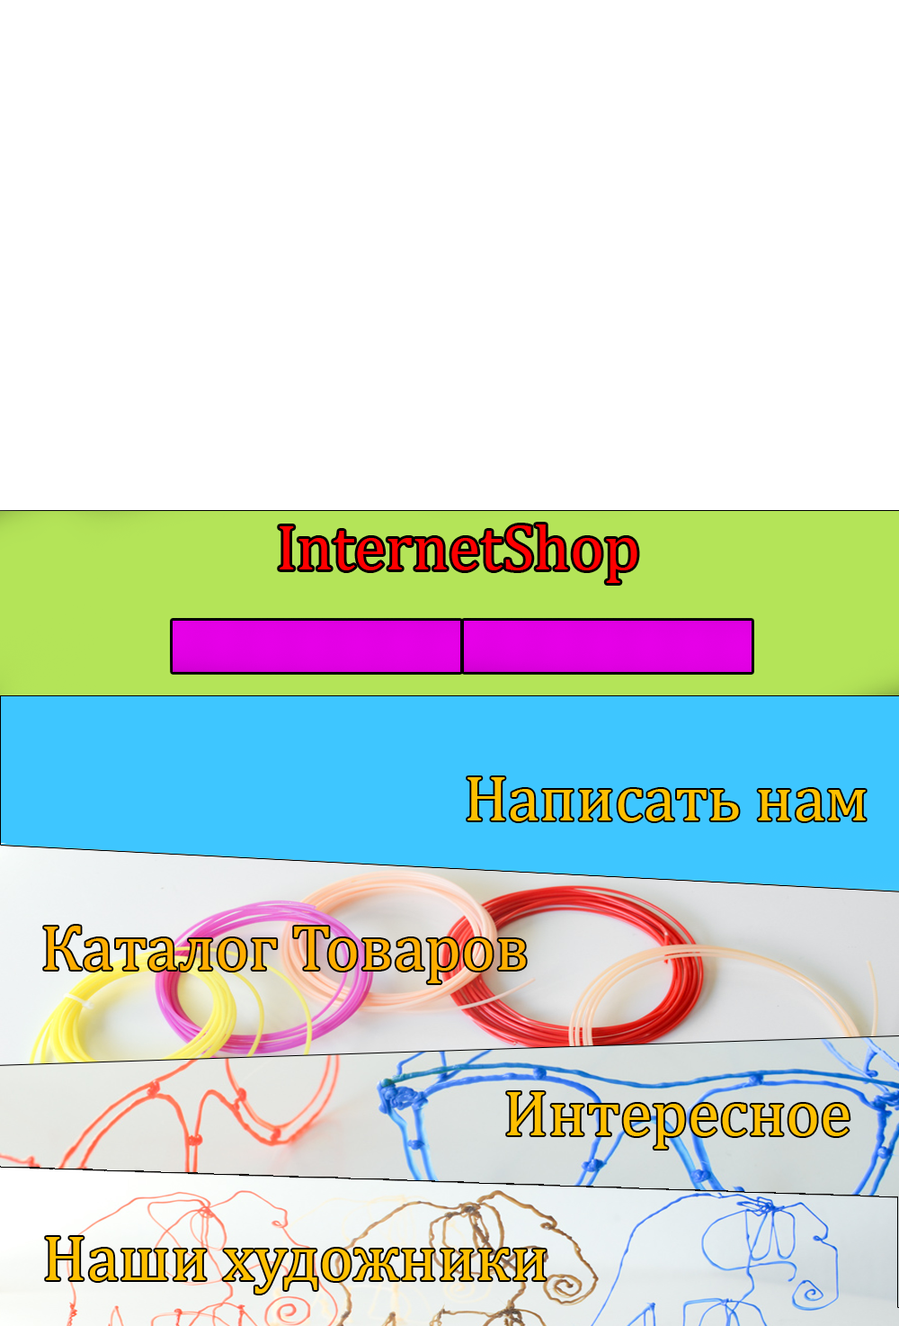
<style>
.page{position:relative;width:899px;height:1326px;background:#ffffff}
.page>*{position:absolute;margin:0}
.t1{font:64.8px "CambriaMath";color:#ff0000}
.t2{font:64.8px "CambriaMath";color:#ffc000}
.t3{font:64.8px "CambriaMath";color:#ffae00}
</style>
<div class="page">
<p class="t1" style="left:280px;top:524px;width:358px;height:59px">InternetShop</p>
<p class="t2" style="left:468px;top:777px;width:398px;height:44px">Написать нам</p>
<p class="t3" style="left:44px;top:926px;width:482px;height:57px">Каталог Товаров</p>
<p class="t2" style="left:507px;top:1092px;width:343px;height:57px">Интересное</p>
<p class="t2" style="left:46px;top:1237px;width:500px;height:56px">Наши художники</p>
</div>
